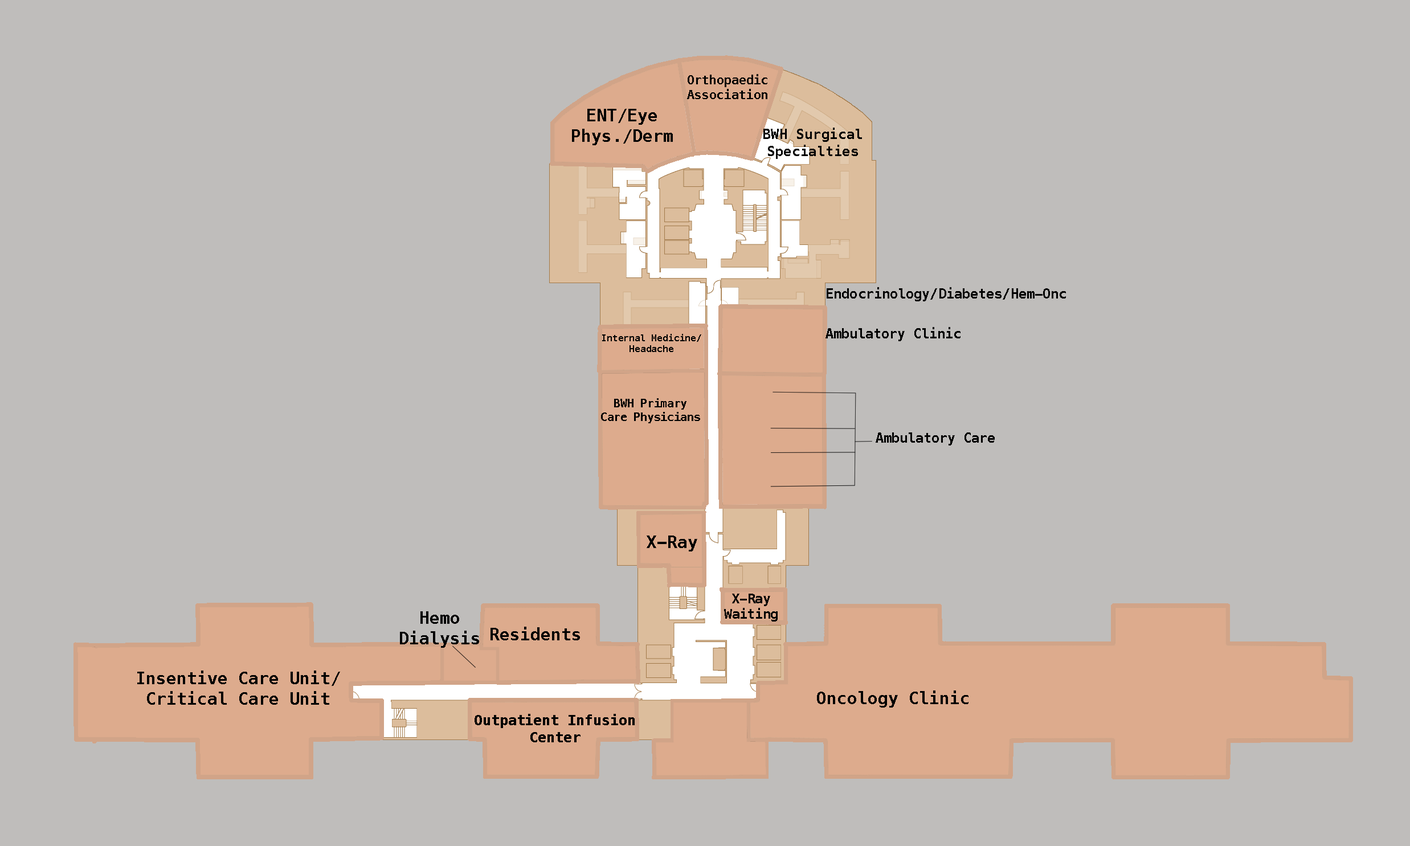
<style>
.page{position:relative;width:1410px;height:846px;background:#bfbdbb}
.page>*{position:absolute;margin:0}
.t1{font:12.3px "Menlo-Bold";color:#000000}
.t2{font:17.1px "Menlo-Bold";color:#000000}
.t3{font:13.9px "Menlo-Bold";color:#000000}
.t4{font:13.4px "Menlo-Bold";color:#000000}
.t5{font:9.3px "Menlo-Bold";color:#000000}
.t6{font:11.1px "Menlo-Bold";color:#000000}
.t7{font:12.8px "Menlo-Bold";color:#000000}
.t8{font:14.2px "Menlo-Bold";color:#000000}
</style>
<div class="page">
<p class="t1" style="left:687px;top:74px;width:80px;height:25px;text-align:center">Orthopaedic<br>Association</p>
<p class="t2" style="left:572px;top:109px;width:101px;height:36px;text-align:center">ENT/Eye<br>Phys./Derm</p>
<p class="t3" style="left:763px;top:128px;width:99px;height:31px;text-align:center">BWH Surgical<br>Specialties</p>
<p class="t4" style="left:826px;top:287px;width:240px;height:14px">Endocrinology/Diabetes/Hem-Onc</p>
<p class="t5" style="left:602px;top:334px;width:99px;height:18px;text-align:center">Internal Medicine/<br>Headache</p>
<p class="t6" style="left:601px;top:398px;width:99px;height:25px;text-align:center">BWH Primary<br>Care Physicians</p>
<p class="t4" style="left:875px;top:432px;width:120px;height:13px">Ambulatory Care</p>
<p class="t2" style="left:646px;top:535px;width:51px;height:16px">X-Ray</p>
<p class="t7" style="left:724px;top:594px;width:53px;height:27px;text-align:center">X-Ray<br>Waiting</p>
<p class="t2" style="left:400px;top:611px;width:79px;height:37px;text-align:center">Hemo<br>Dialysis</p>
<p class="t2" style="left:490px;top:627px;width:90px;height:13px">Residents</p>
<p class="t2" style="left:137px;top:670px;width:203px;height:35px;text-align:center">Insentive Care Unit/<br>Critical Care Unit</p>
<p class="t2" style="left:817px;top:690px;width:151px;height:17px">Oncology Clinic</p>
<p class="t8" style="left:474px;top:714px;width:161px;height:28px;text-align:center">Outpatient Infusion<br>Center</p>
</div>
